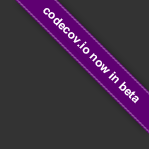
<style>
.page{position:relative;width:149px;height:149px;background:#333333}
.page>*{position:absolute;margin:0}
.t1{font:12px "Arial-BoldMT";color:#ffffff}
</style>
<div class="page">
<p class="t1" style="left:43px;top:8px;width:96px;height:96px;rotate:45deg">codecov.io now in beta</p>
</div>
